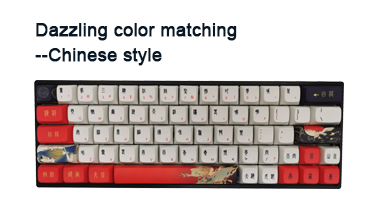
<style>
.page{position:relative;width:380px;height:200px;background:#ffffff}
.page>*{position:absolute;margin:0}
.t1{font:18px "ArialMT";color:#061726;font-weight:bold}
</style>
<div class="page">
<p class="t1" style="left:36px;top:23px;width:201px;height:18px">Dazzling color matching</p>
<p class="t1" style="left:35px;top:48px;width:127px;height:18px">--Chinese style</p>
</div>
